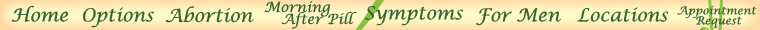
<style>
.page{position:relative;width:760px;height:30px}
.page>*{position:absolute;margin:0}
.t1{font:18px "LucidaCalligraphy-Italic";color:#336633}
.t2{font:14px "LucidaCalligraphy-Italic";color:#336633}
.t3{font:11px "LucidaCalligraphy-Italic";color:#336633}
</style>
<div class="page">
<p class="t1" style="left:11px;top:5px;width:57px;height:17px">Home</p>
<p class="t1" style="left:165px;top:6px;width:89px;height:17px">Abortion</p>
<p class="t2" style="left:264px;top:1px;width:67px;height:16px">Morning</p>
<p class="t1" style="left:365px;top:6px;width:98px;height:20px">Symptoms</p>
<p class="t3" style="left:677px;top:5px;width:80px;height:13px">Appointment</p>
<p class="t1" style="left:83px;top:7px;width:71px;height:21px">Options</p>
<p class="t2" style="left:281px;top:11px;width:76px;height:18px">After Pill</p>
<p class="t1" style="left:476px;top:8px;width:85px;height:18px">For Men</p>
<p class="t1" style="left:577px;top:7px;width:92px;height:15px">Locations</p>
<p class="t3" style="left:696px;top:16px;width:46px;height:12px">Request</p>
</div>
